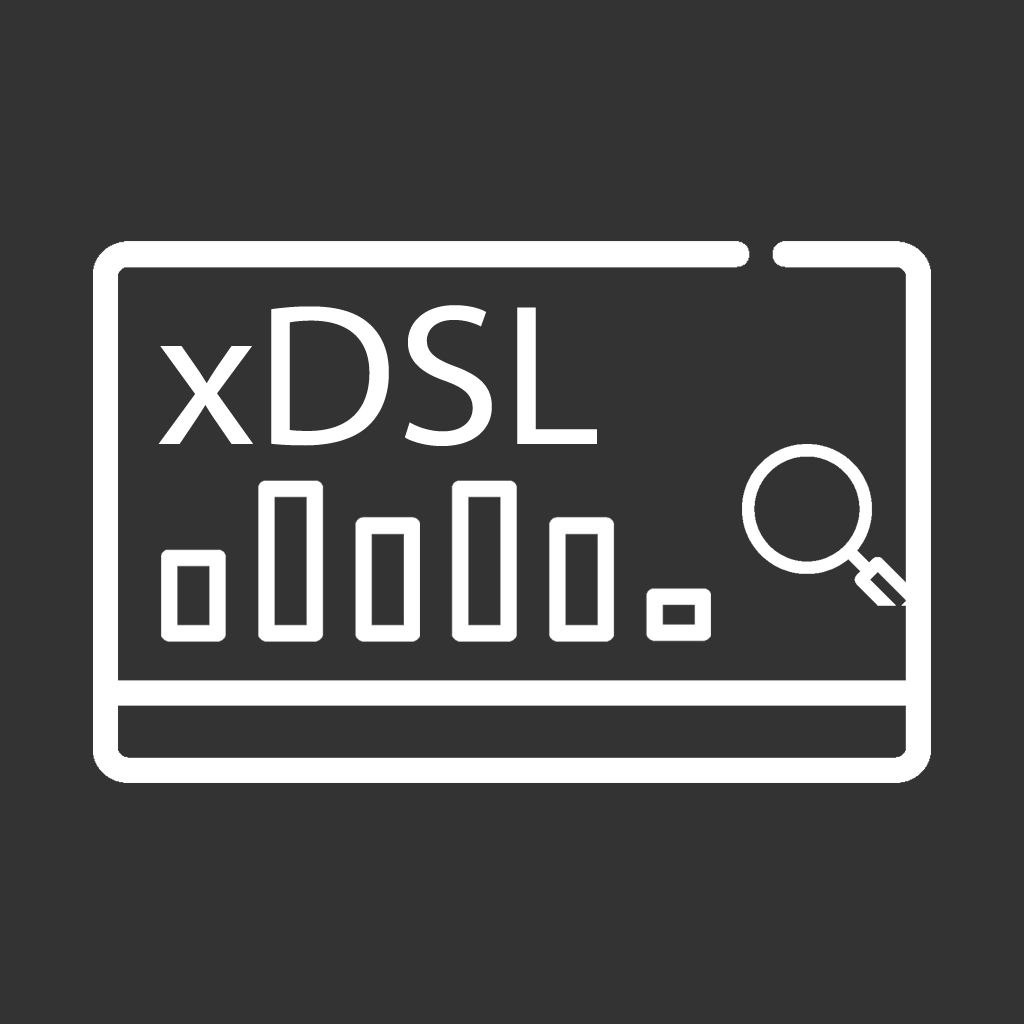
<style>
.page{position:relative;width:1024px;height:1024px;background:#333333}
.page>*{position:absolute;margin:0}
.t1{font:202.4px "MyriadPro-Regular";color:#ffffff;scale:1.05 1}
</style>
<div class="page">
<p class="t1" style="left:158px;top:305px;width:439px;height:141px">xDSL</p>
</div>
